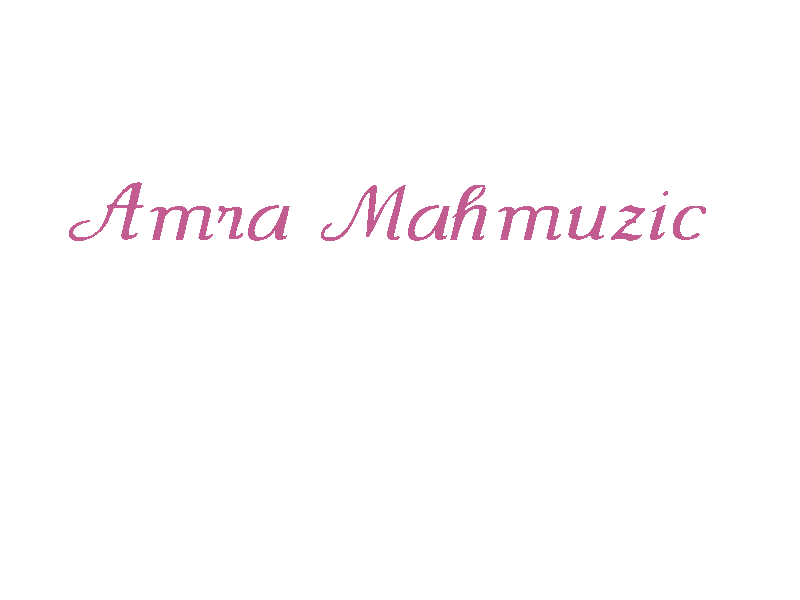
<style>
.page{position:relative;width:800px;height:600px;background:#ffffff}
.page>*{position:absolute;margin:0}
.t1{font:100px "Wenceslas-Oblique";color:#c35c91;scale:1.2 1}
</style>
<div class="page">
<p class="t1" style="left:69px;top:182px;width:637px;height:59px">Amra Mahmuzic</p>
</div>
